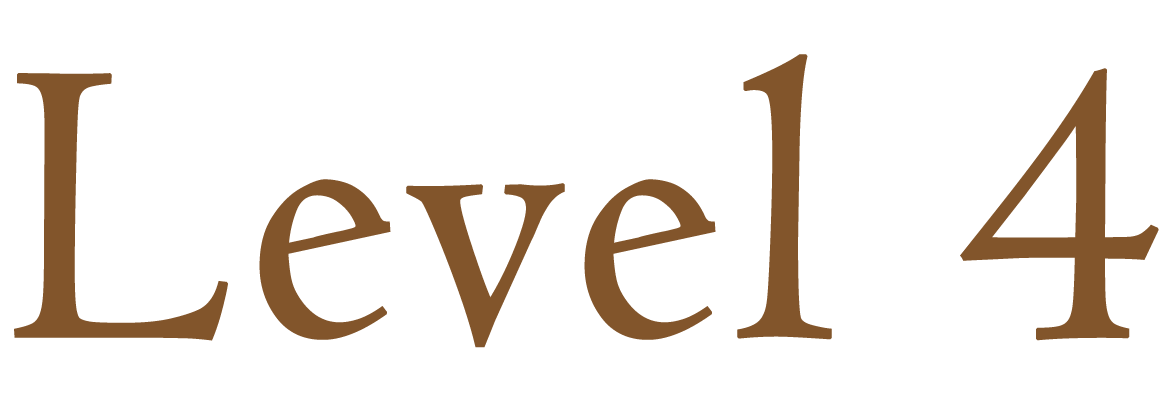
<style>
.page{position:relative;width:1170px;height:398px;background:#ffffff}
.page>*{position:absolute;margin:0}
.t1{font:416.7px "Centaur";color:#82552b;font-weight:bold}
</style>
<div class="page">
<p class="t1" style="left:14px;top:54px;width:1145px;height:294px">Level 4</p>
</div>
